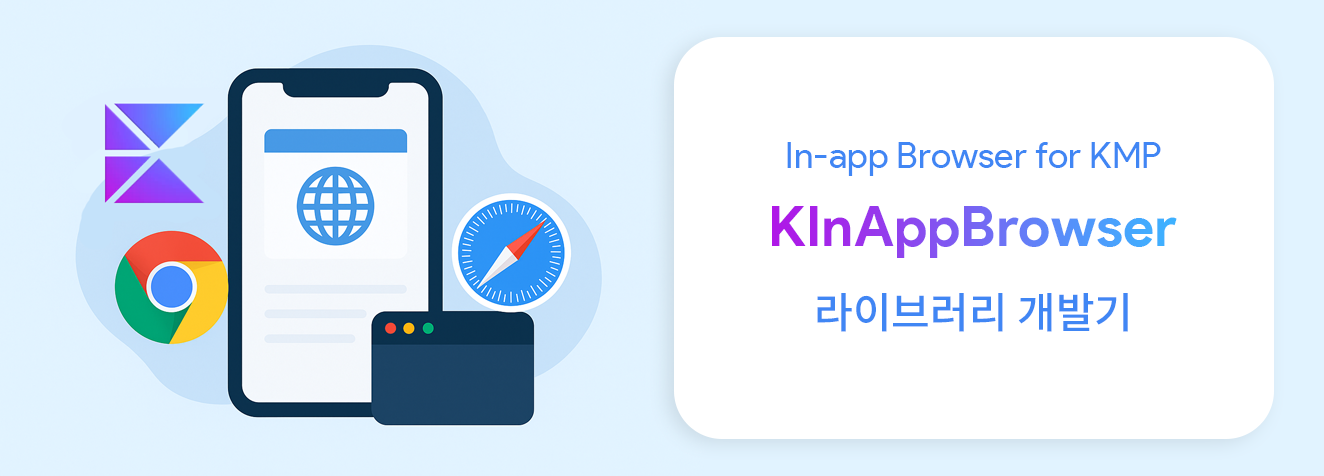
<style>
.page{position:relative;width:1324px;height:476px;background:#ffffff}
.page>*{position:absolute;margin:0}
.t1{font:36px/80px "ProductSans-Regular";color:#4086f4}
.t2{font:56px "ProductSans-Regular";color:#4086f4}
.t3{font:42px/80px "NotoSansKR-Medium";color:#4086f4}
.t4{font:56px "ProductSans-Bold"}
</style>
<div class="page">
<p class="t1" style="left:787px;top:142px;width:374px;height:190px;text-align:center"><span class="t2"><br></span>In-app Browser for KMP<br><br><span class="t3">라이브러리 개발기</span></p>
<p class="t4" style="left:772px;top:206px;width:405px;height:52px">KInAppBrowser</p>
</div>
